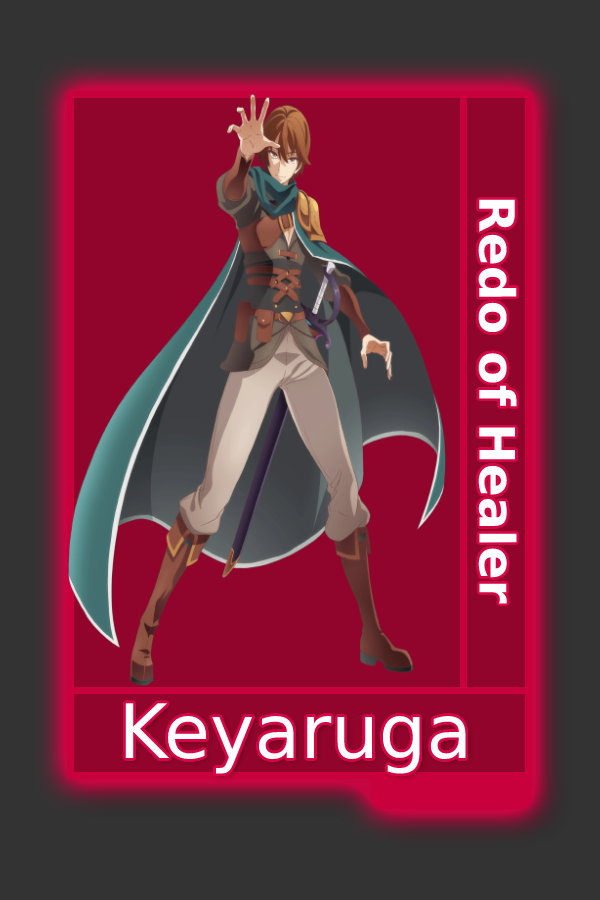
<style>
.page{position:relative;width:600px;height:900px;background:#91042c}
.page>*{position:absolute;margin:0}
.t1{font:48.8px "MADETOMMY-Bold";color:#fefdff}
.t2{font:75px "CoolveticaRg-Regular";color:#fefdff}
</style>
<div class="page">
<p class="t1" style="left:478px;top:199px;width:39px;height:405px;rotate:90deg">Redo of Healer</p>
<p class="t2" style="left:125px;top:703px;width:341px;height:71px">Keyaruga</p>
</div>
